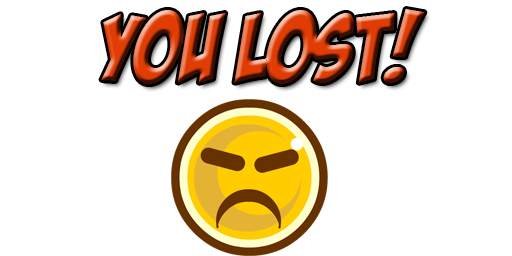
<style>
.page{position:relative;width:512px;height:256px;background:#ffffff}
.page>*{position:absolute;margin:0}
.t1{font:94.8px "BadaBoomBB";letter-spacing:0.003em}
</style>
<div class="page">
<p class="t1" style="left:101px;top:9px;width:324px;height:75px">YOU LOST!</p>
</div>
